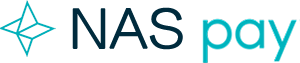
<style>
.page{position:relative;width:300px;height:63px;background:#ffffff}
.page>*{position:absolute;margin:0}
.t1{font:50px "FZLTXHK--GBK1-0";color:#002b3d;font-weight:bold}
</style>
<div class="page">
<p class="t1" style="left:72px;top:7px;width:111px;height:43px">NAS</p>
</div>
